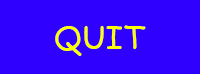
<style>
.page{position:relative;width:200px;height:74px;background:#3000fe}
.page>*{position:absolute;margin:0}
.t1{font:31.3px "ComicSansMS";color:#ffff00}
</style>
<div class="page">
<p class="t1" style="left:55px;top:25px;width:91px;height:31px">QUIT</p>
</div>
